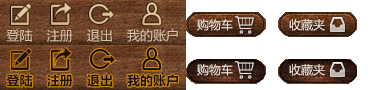
<style>
.page{position:relative;width:370px;height:90px;background:#ffffff}
.page>*{position:absolute;margin:0}
.t1{font:13px "MicrosoftYaHei";color:#d5c5a9}
.t2{font:13px "MicrosoftYaHei";color:#d4c5a9}
.t3{font:12px "MicrosoftYaHei";color:#f1efe5}
.t4{font:13px "MicrosoftYaHei-Bold";color:#160a03}
.t5{font:13px "MicrosoftYaHei-Bold";color:#1c0e07}
.t6{font:13px "MicrosoftYaHei-Bold";color:#1d1204}
</style>
<div class="page">
<p class="t1" style="left:6px;top:29px;width:27px;height:13px">登陆</p>
<p class="t1" style="left:47px;top:29px;width:26px;height:13px">注册</p>
<p class="t2" style="left:87px;top:29px;width:25px;height:13px">退出</p>
<p class="t1" style="left:127px;top:29px;width:51px;height:13px">我的账户</p>
<p class="t3" style="left:197px;top:19px;width:36px;height:12px">购物车</p>
<p class="t3" style="left:289px;top:19px;width:36px;height:12px">收藏夹</p>
<p class="t3" style="left:197px;top:64px;width:36px;height:12px">购物车</p>
<p class="t3" style="left:289px;top:64px;width:36px;height:12px">收藏夹</p>
<p class="t4" style="left:6px;top:74px;width:27px;height:13px;opacity:0.9">登陆</p>
<p class="t5" style="left:47px;top:74px;width:26px;height:13px;opacity:0.9">注册</p>
<p class="t6" style="left:87px;top:74px;width:26px;height:13px;opacity:0.9">退出</p>
<p class="t6" style="left:127px;top:74px;width:51px;height:13px;opacity:0.9">我的账户</p>
</div>
